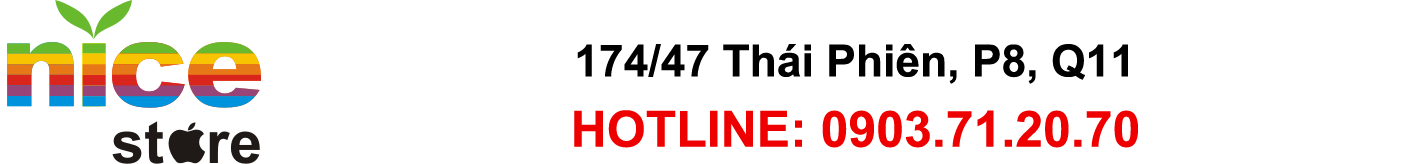
<style>
.page{position:relative;width:1417px;height:164px;background:#ffffff}
.page>*{position:absolute;margin:0}
.t1{font:44.4px "Arial-BoldMT";color:#000000}
.t2{font:50px "Arial-BoldMT";color:#ee0000}
</style>
<div class="page">
<p class="t1" style="left:577px;top:44px;width:551px;height:40px">174/47 Thái Phiên, P8, Q11</p>
<p class="t2" style="left:574px;top:110px;width:564px;height:38px">HOTLINE: 0903.71.20.70</p>
</div>
